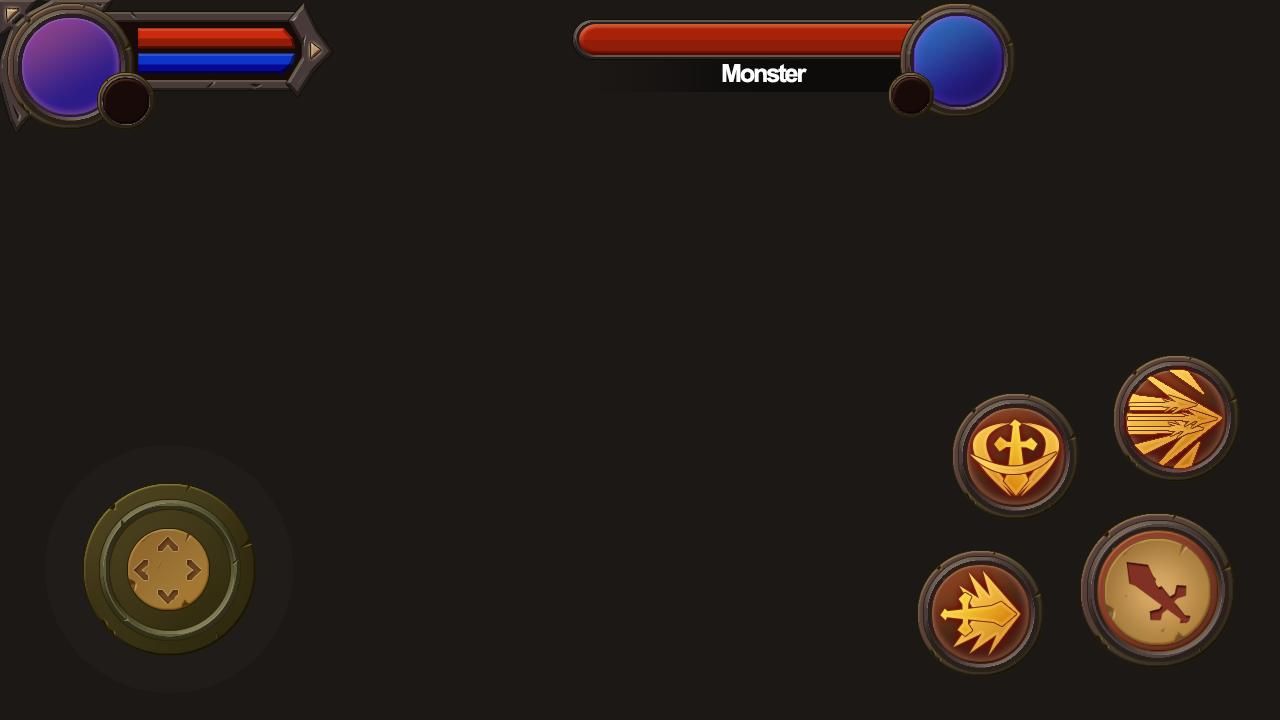
<style>
.page{position:relative;width:1280px;height:720px;background:#1c1816}
.page>*{position:absolute;margin:0}
.t1{font:25px "Arial-BoldMT";letter-spacing:-0.08em;color:#ffffff}
</style>
<div class="page">
<p class="t1" style="left:722px;top:64px;width:85px;height:19px">Monster</p>
</div>
